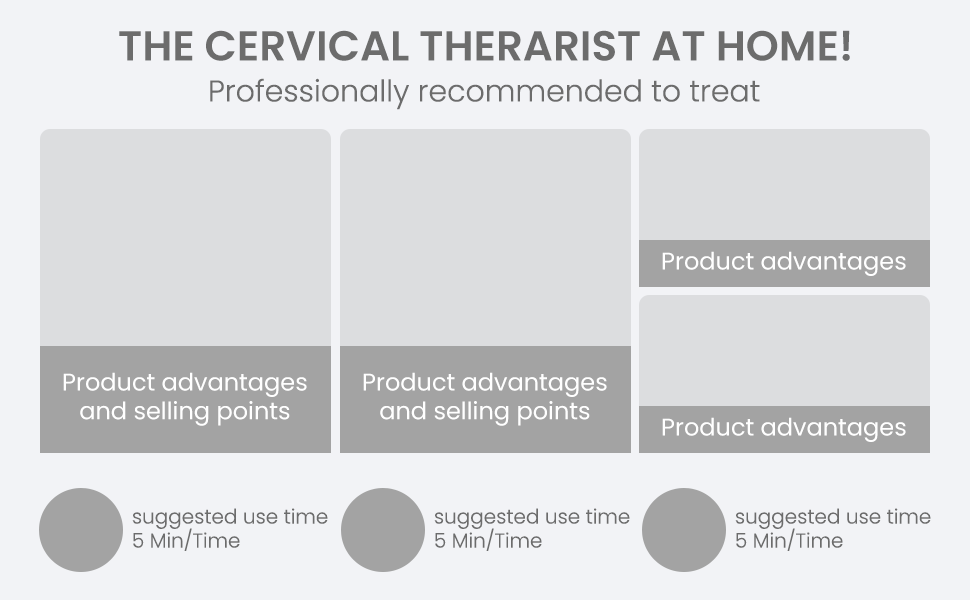
<style>
.page{position:relative;width:970px;height:600px;background:#f2f3f6}
.page>*{position:absolute;margin:0}
.t1{font:42px "Poppins-SemiBold";color:#6c6c6c;text-transform:uppercase}
.t2{font:30px "Poppins-Light";color:#6c6c6c}
.t3{font:24px "Poppins-Regular";color:#ffffff}
.t4{font:20px "Poppins-Light";color:#6c6c6c}
</style>
<div class="page">
<p class="t1" style="left:119px;top:30px;width:731px;height:31px">The cervical Therarist at Home!</p>
<p class="t2" style="left:210px;top:78px;width:550px;height:32px">Professionally recommended to treat</p>
<p class="t3" style="left:662px;top:251px;width:244px;height:25px">Product advantages</p>
<p class="t3" style="left:63px;top:372px;width:244px;height:54px;text-align:center">Product advantages<br>and selling points</p>
<p class="t3" style="left:363px;top:372px;width:244px;height:54px;text-align:center">Product advantages<br>and selling points</p>
<p class="t3" style="left:662px;top:417px;width:244px;height:25px">Product advantages</p>
<p class="t4" style="left:132px;top:508px;width:196px;height:43px">suggested use time<br>5 Min/Time</p>
<p class="t4" style="left:434px;top:508px;width:196px;height:43px">suggested use time<br>5 Min/Time</p>
<p class="t4" style="left:735px;top:508px;width:196px;height:43px">suggested use time<br>5 Min/Time</p>
</div>
